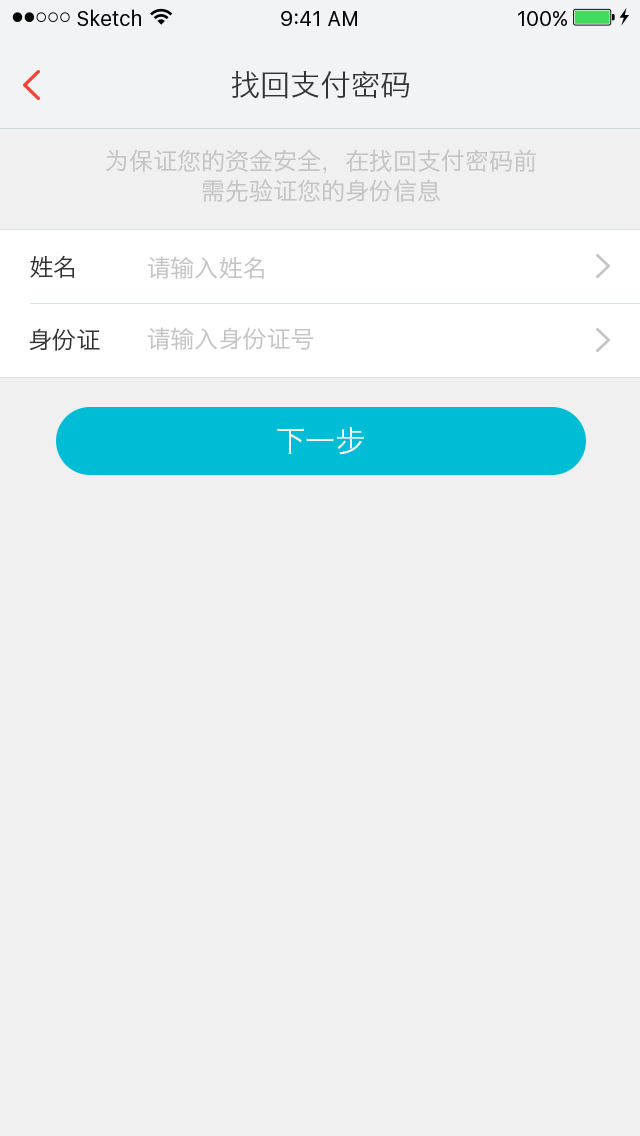
<style>
.page{position:relative;width:640px;height:1136px;background:#f0f0f0}
.page>*{position:absolute;margin:0}
.t1{font:30px "HiraginoSansGB-W3";color:#333333}
.t2{font:24px "HiraginoSansGB-W3";color:#c4c4c4}
.t3{font:24px "HiraginoSansGB-W3";color:#333333}
.t4{font:30px "HiraginoSansGB-W3";color:#fffefe}
</style>
<div class="page">
<p class="t1" style="left:231px;top:71px;width:178px;height:28px">找回支付密码</p>
<p class="t2" style="left:106px;top:149px;width:430px;height:24px">为保证您的资金安全，在找回支付密码前</p>
<p class="t2" style="left:202px;top:179px;width:238px;height:24px">需先验证您的身份信息</p>
<p class="t3" style="left:30px;top:255px;width:45px;height:23px">姓名</p>
<p class="t2" style="left:147px;top:256px;width:117px;height:23px">请输入姓名</p>
<p class="t3" style="left:29px;top:328px;width:71px;height:23px">身份证</p>
<p class="t2" style="left:147px;top:327px;width:167px;height:23px">请输入身份证号</p>
<p class="t4" style="left:277px;top:427px;width:87px;height:28px">下一步</p>
</div>
